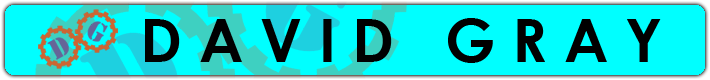
<style>
.page{position:relative;width:710px;height:80px;background:#00ffff}
.page>*{position:absolute;margin:0}
.t1{font:60px "CenturyGothic-Bold";color:#000000}
</style>
<div class="page">
<p class="t1" style="left:145px;top:18px;width:516px;height:45px">D A V I D   G R A Y</p>
</div>
